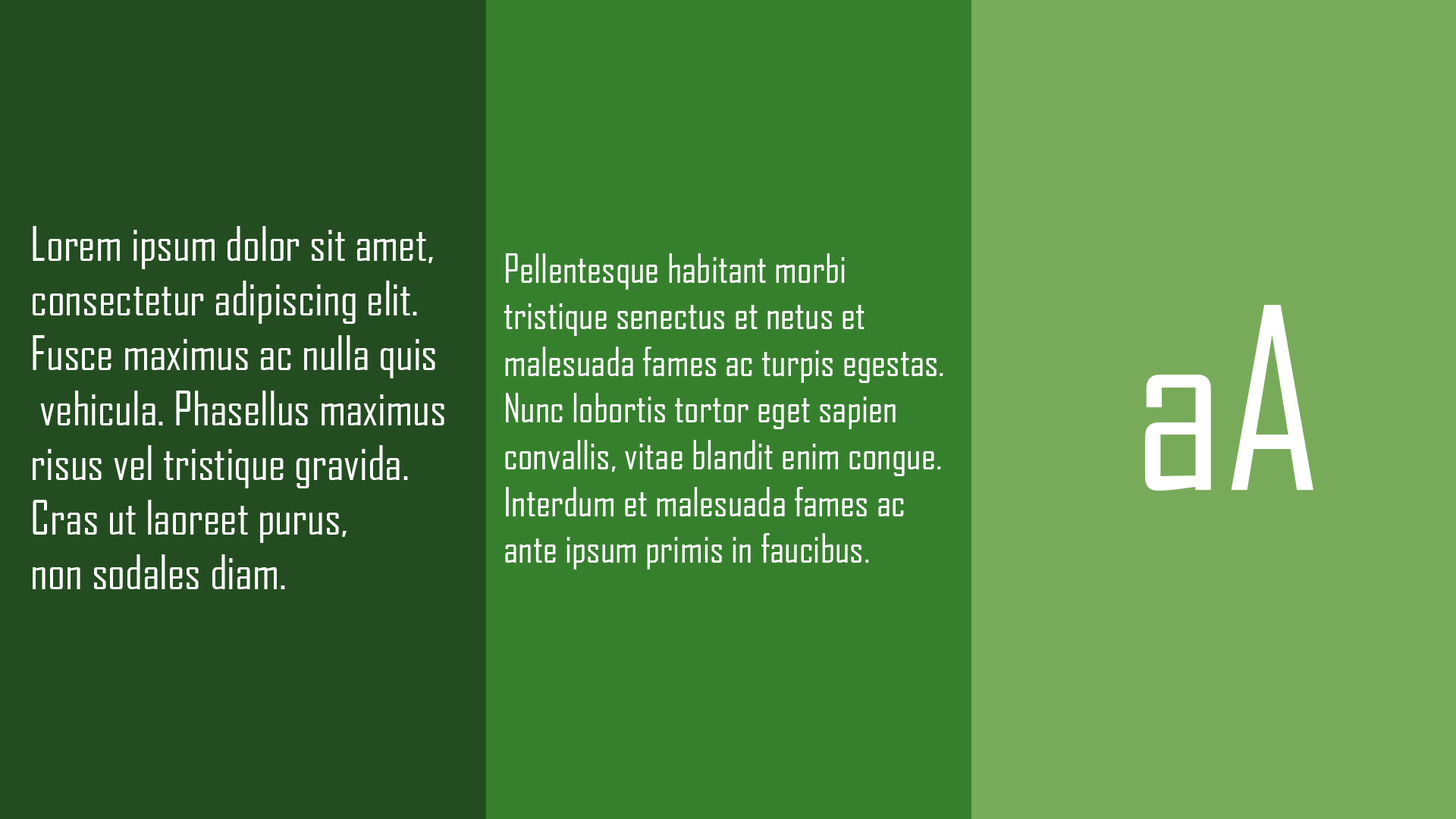
<style>
.page{position:relative;width:1456px;height:819px;background:#77ab59}
.page>*{position:absolute;margin:0}
.t1{font:45.6px "AgencyFB-Reg";color:#ffffff}
.t2{font:38.9px "AgencyFB-Reg";color:#ffffff}
.t3{font:242.2px "AgencyFB-Reg";color:#ffffff}
</style>
<div class="page">
<p class="t1" style="left:33px;top:226px;width:411px;height:363px">Lorem ipsum dolor sit amet, <br>consectetur adipiscing elit. <br>Fusce maximus ac nulla quis<br> vehicula. Phasellus maximus <br>risus vel tristique gravida. <br>Cras ut laoreet purus, <br>non sodales diam.</p>
<p class="t2" style="left:504px;top:253px;width:439px;height:317px">Pellentesque habitant morbi <br>tristique senectus et netus et <br>malesuada fames ac turpis egestas. <br>Nunc lobortis tortor eget sapien <br>convallis, vitae blandit enim congue. <br>Interdum et malesuada fames ac <br>ante ipsum primis in faucibus.</p>
<p class="t3" style="left:1145px;top:305px;width:168px;height:186px">aA</p>
</div>
